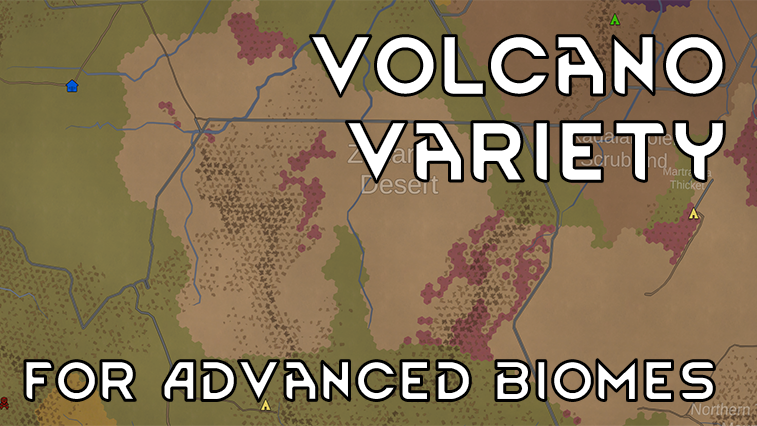
<style>
.page{position:relative;width:757px;height:426px}
.page>*{position:absolute;margin:0}
.t1{font:72px "RimWordFont";color:#ffffff}
.t2{font:48px "RimWordFont";color:#ffffff}
</style>
<div class="page">
<p class="t1" style="left:310px;top:35px;width:415px;height:148px;text-align:right">Volcano<br>Variety</p>
<p class="t2" style="left:25px;top:359px;width:690px;height:43px">For Advanced Biomes</p>
</div>
